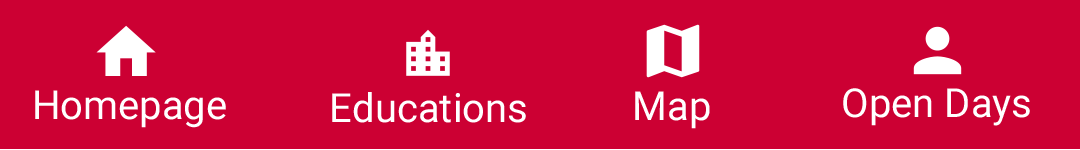
<style>
.page{position:relative;width:1080px;height:150px;background:#cc0033}
.page>*{position:absolute;margin:0}
.t1{font:40px "Roboto-Regular";color:#ffffff}
</style>
<div class="page">
<p class="t1" style="left:843px;top:88px;width:187px;height:38px">Open Days</p>
<p class="t1" style="left:35px;top:90px;width:191px;height:38px">Homepage</p>
<p class="t1" style="left:332px;top:92px;width:194px;height:31px">Educations</p>
<p class="t1" style="left:635px;top:91px;width:75px;height:38px">Map</p>
</div>
